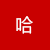
<style>
.page{position:relative;width:50px;height:50px;background:#c90000}
.page>*{position:absolute;margin:0}
.t1{font:18px "MicrosoftYaHei";color:#ffffff}
</style>
<div class="page">
<p class="t1" style="left:16px;top:16px;width:17px;height:18px">哈</p>
</div>
